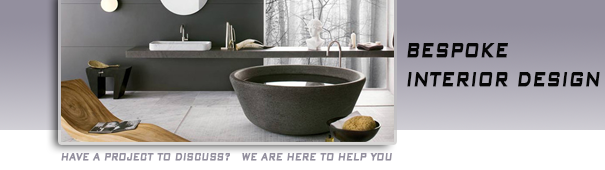
<style>
.page{position:relative;width:605px;height:170px}
.page>*{position:absolute;margin:0}
.t1{font:27px/30px "BankGothicBT-Medium";color:#060606;font-weight:bold;font-style:italic;scale:0.67 1}
.t2{font:13.5px "BankGothicBT-Medium";color:#938f9e;font-weight:bold;font-style:italic;scale:0.67 1}
</style>
<div class="page">
<p class="t1" style="left:407px;top:43px;width:193px;height:44px;text-align:right">BESPOKE <br>INTERIOR DESIGN</p>
<p class="t2" style="left:61px;top:153px;width:331px;height:8px">HAVE A PROJECT TO DISCUSS?   WE ARE HERE TO HELP YOU</p>
</div>
